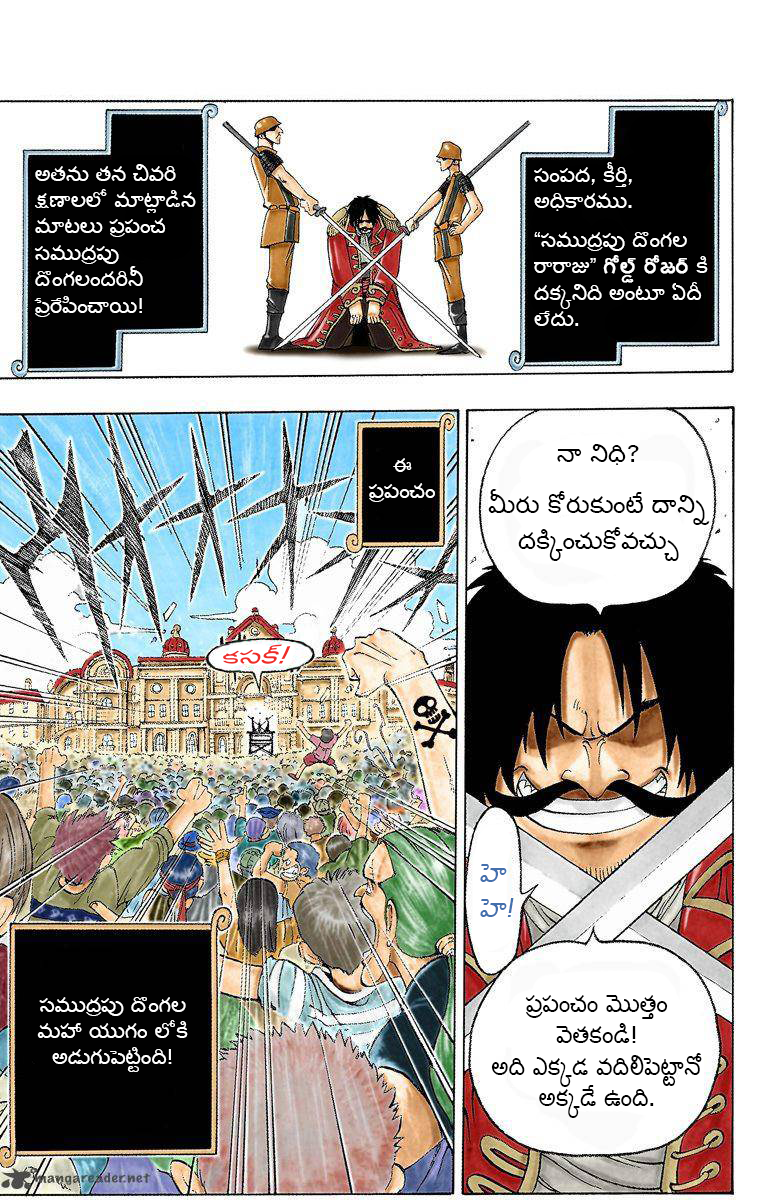
<style>
.page{position:relative;width:780px;height:1200px;background:#ffffff}
.page>*{position:absolute;margin:0}
.t1{font:22px "Gautami";color:#ffffff}
.t2{font:22px "Gautami";color:#ffffff;font-weight:bold}
.t3{font:26px "Gautami";color:#000000}
.t4{font:24.4px "Gautami";color:#ee2d28;font-style:italic}
.t5{font:29px "Gautami";color:#4470ad;font-style:italic;scale:0.92 1}
.t6{font:26px "Gautami";color:#000000;scale:0.92 1}
</style>
<div class="page">
<p class="t1" style="left:34px;top:164px;width:162px;height:153px">అతను తన చివరి క్షణాలలో మాట్లాడిన మాటలు ప్రపంచ సముద్రపు దొంగలందరినీ ప్రేరేపించాయి!</p>
<p class="t1" style="left:534px;top:162px;width:174px;height:164px">సంపద, కీర్తి, అధికారము.<br> <br>“సముద్రపు దొంగల రారాజు” <span class="t2">గోల్డ్ రోజర్ </span>కి దక్కనిది అంటూ ఏదీ లేదు.</p>
<p class="t3" style="left:488px;top:444px;width:222px;height:117px;text-align:center">నా నిధి? <br> <br><br>మీరు కోరుకుంటే దాన్ని <br> <br>దక్కించుకోవచ్చు</p>
<p class="t1" style="left:368px;top:458px;width:67px;height:44px;text-align:center">ఈ<br>ప్రపంచం</p>
<p class="t4" style="left:223px;top:644px;width:68px;height:20px">కసక్!</p>
<p class="t5" style="left:480px;top:864px;width:34px;height:53px">హెహె!</p>
<p class="t1" style="left:37px;top:997px;width:151px;height:75px;text-align:center">సముద్రపు దొంగల మహా యుగం లోకి అడుగుపెట్టింది!</p>
<p class="t6" style="left:491px;top:995px;width:211px;height:123px;text-align:center">ప్రపంచం మొత్తం వెతకండి! <br>అది ఎక్కడ వదిలిపెట్టానో అక్కడే ఉంది.</p>
</div>
